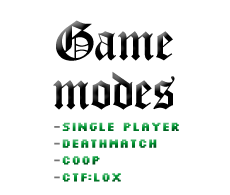
<style>
.page{position:relative;width:230px;height:195px;background:#ffffff}
.page>*{position:absolute;margin:0}
.t1{font:60px "Oldchristmas-Regular";color:#000000}
.t2{font:14px "Silkscreen-Bold";scale:0.85 1}
</style>
<div class="page">
<p class="t1" style="left:56px;top:20px;width:117px;height:41px">Game</p>
<p class="t1" style="left:53px;top:71px;width:122px;height:39px">modes</p>
<p class="t2" style="left:54px;top:122px;width:125px;height:60px">-single player<br>-Deathmatch<br>-coop<br>-CTF:LOX</p>
</div>
